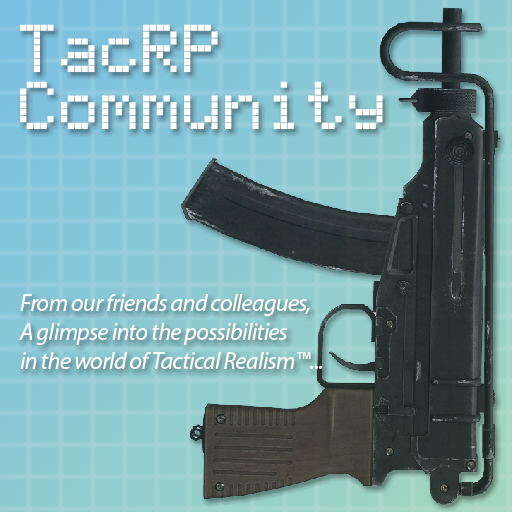
<style>
.page{position:relative;width:512px;height:512px}
.page>*{position:absolute;margin:0}
.t1{font:48px "HD44780A00-5x8";color:#ffffff}
.t2{font:24px "MyriadPro-It";letter-spacing:-0.025em;color:#ffffff}
</style>
<div class="page">
<p class="t1" style="left:20px;top:24px;width:322px;height:105px">TacRP<br>One-Offs</p>
<p class="t1" style="left:20px;top:24px;width:363px;height:105px">TacRP<br>Community</p>
<p class="t2" style="left:19px;top:294px;width:304px;height:75px">From our friends and colleagues,<br>A glimpse into the possibilities<br>in the world of Tactical Realism™...</p>
</div>
